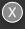
<style>
.page{position:relative;width:25px;height:29px;background:#8b8b8b}
.page>*{position:absolute;margin:0}
.t1{font:13.6px "Segoe";letter-spacing:-0.01em;color:#ffffff}
</style>
<div class="page">
<p class="t1" style="left:8px;top:7px;width:8px;height:11px">X</p>
</div>
